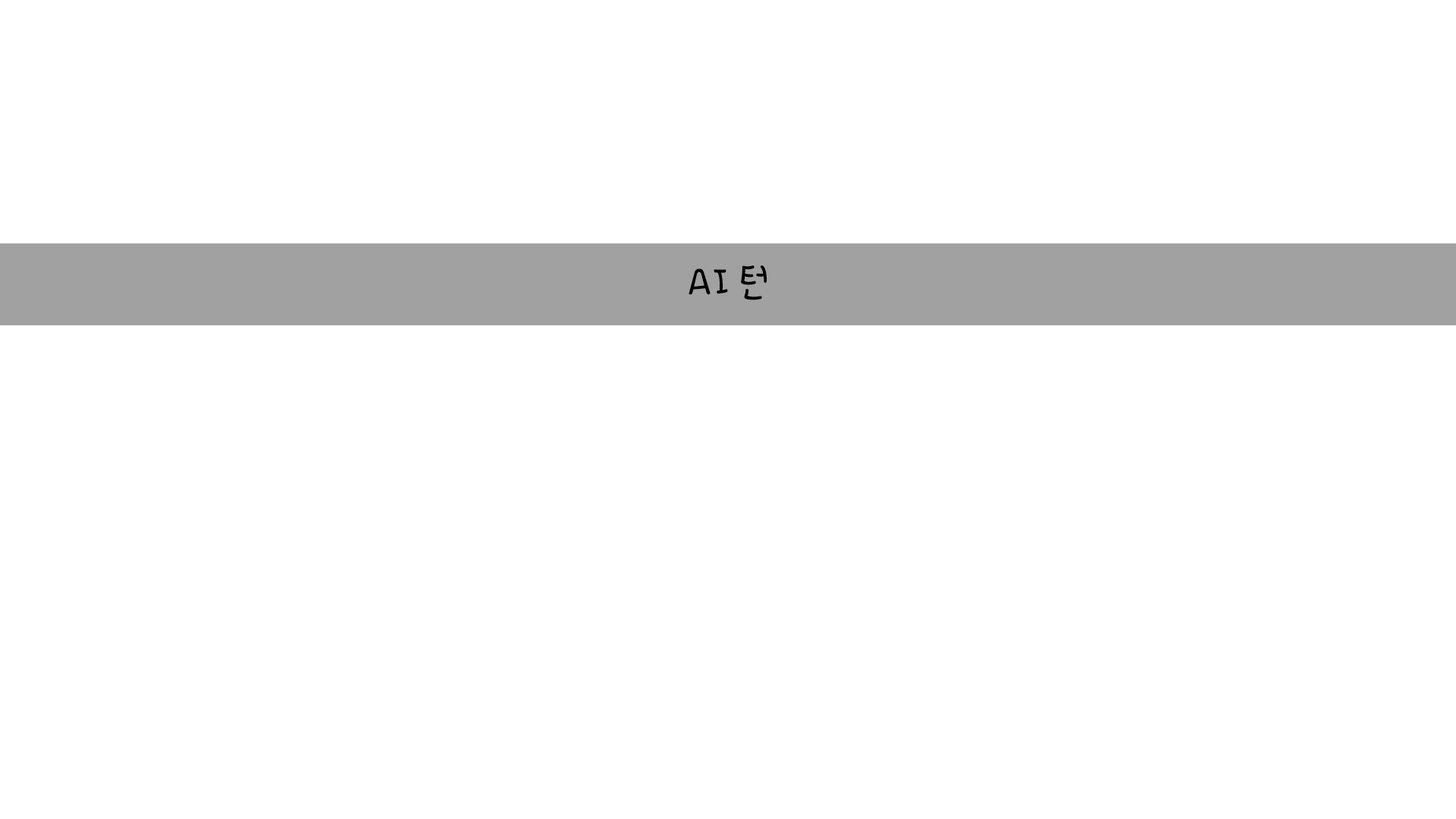
<style>
.page{position:relative;width:1456px;height:819px;background:#ffffff}
.page>*{position:absolute;margin:0}
.t1{font:45.5px "365uppercat";color:#000000}
</style>
<div class="page">
<p class="t1" style="left:689px;top:265px;width:78px;height:35px">AI 턴</p>
</div>
